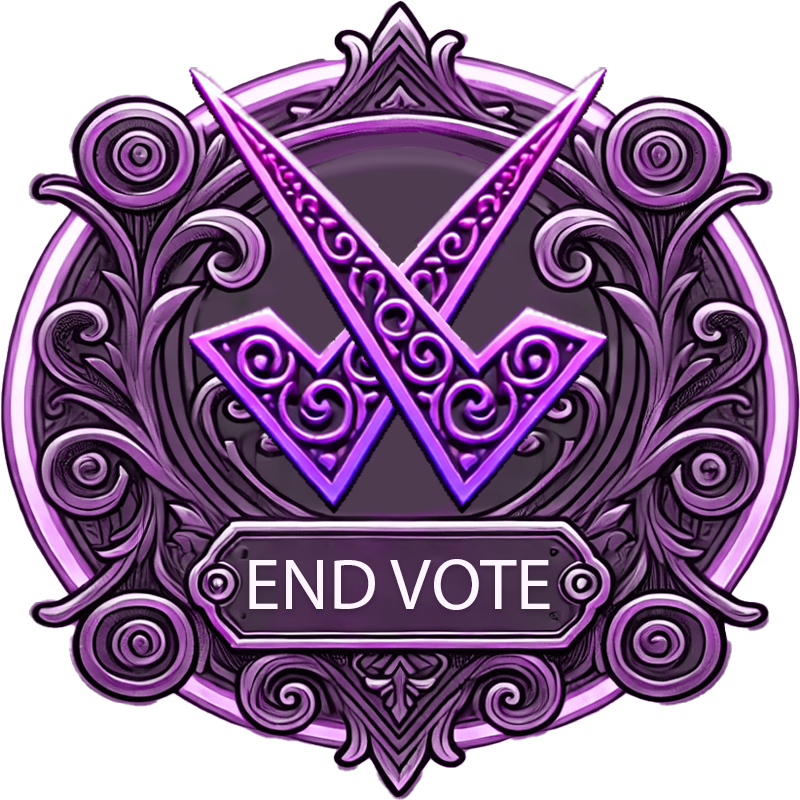
<style>
.page{position:relative;width:800px;height:800px;background:#ffffff}
.page>*{position:absolute;margin:0}
.t1{font:73.3px "MyriadPro-Regular";color:#fef5ff}
</style>
<div class="page">
<p class="t1" style="left:249px;top:559px;width:301px;height:51px">END VOTE</p>
</div>
